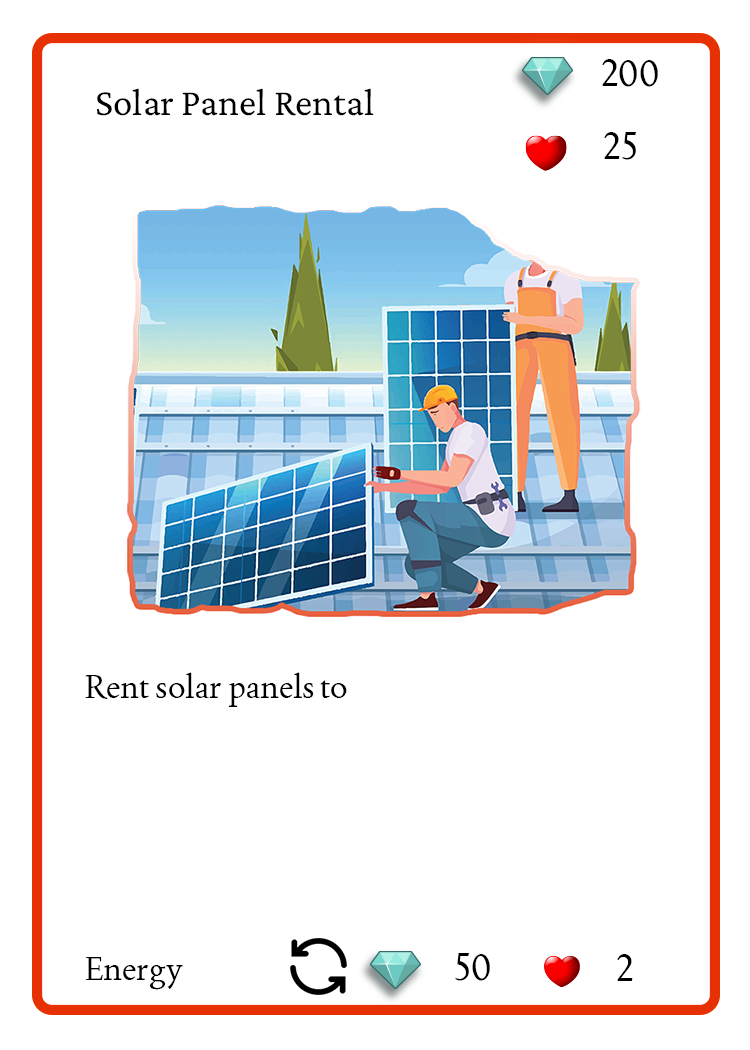
<style>
.page{position:relative;width:750px;height:1050px;background:#ffffff}
.page>*{position:absolute;margin:0}
.t1{font:37.5px "Joan-Regular";color:#000000;text-transform:uppercase}
.t2{font:38.9px "CrimsonPro-Regular";color:#000000}
.t3{font:33.3px "Joan-Regular";color:#000000}
</style>
<div class="page">
<p class="t1" style="left:602px;top:59px;width:56px;height:28px">200</p>
<p class="t2" style="left:97px;top:88px;width:277px;height:28px">Solar Panel Rental</p>
<p class="t1" style="left:604px;top:132px;width:32px;height:28px">25</p>
<p class="t3" style="left:85px;top:672px;width:262px;height:35px">Rent solar panels to</p>
<p class="t1" style="left:455px;top:953px;width:35px;height:28px">50</p>
<p class="t3" style="left:85px;top:957px;width:98px;height:33px">Energy</p>
<p class="t1" style="left:617px;top:954px;width:16px;height:27px">2</p>
</div>
